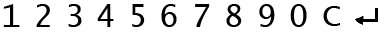
<style>
.page{position:relative;width:384px;height:32px;background:#ffffff}
.page>*{position:absolute;margin:0}
.t1{font:32px "LucidaConsole";color:#000000}
</style>
<div class="page">
<p class="t1" style="left:3px;top:4px;width:17px;height:23px">1</p>
<p class="t1" style="left:36px;top:4px;width:14px;height:23px">2</p>
<p class="t1" style="left:68px;top:4px;width:14px;height:23px">3</p>
<p class="t1" style="left:97px;top:4px;width:17px;height:23px">4</p>
<p class="t1" style="left:132px;top:4px;width:13px;height:23px">5</p>
<p class="t1" style="left:161px;top:4px;width:16px;height:23px">6</p>
<p class="t1" style="left:195px;top:4px;width:15px;height:23px">7</p>
<p class="t1" style="left:226px;top:4px;width:16px;height:23px">8</p>
<p class="t1" style="left:259px;top:4px;width:16px;height:23px">9</p>
<p class="t1" style="left:290px;top:4px;width:17px;height:23px">0</p>
<p class="t1" style="left:323px;top:6px;width:17px;height:20px">C</p>
</div>
